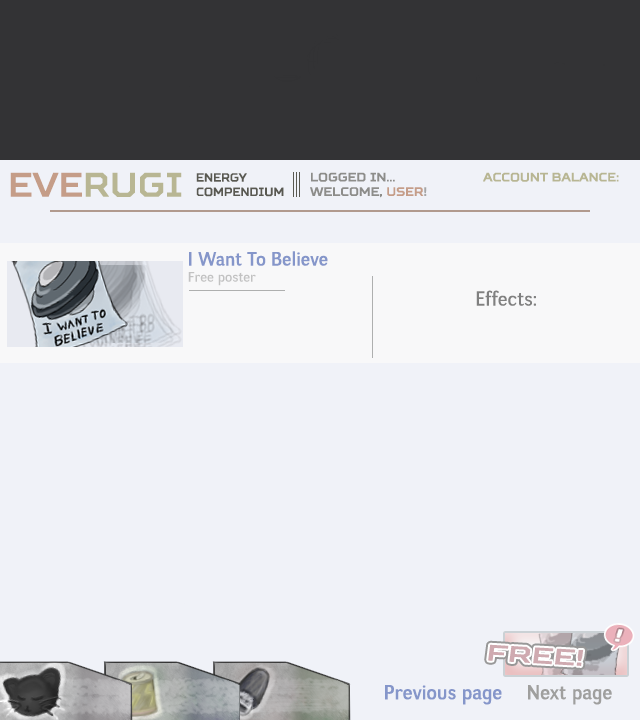
<style>
.page{position:relative;width:640px;height:720px;background:#f0f2f8}
.page>*{position:absolute;margin:0}
.t1{font:33.6px "SquaresBold";color:#b8b693}
.t2{font:33.6px "SquaresBold";color:#c59d88}
.t3{font:12px "SquaresBold";color:#595951;scale:0.92 1}
.t4{font:12px "SquaresBold";color:#8d8d8a}
.t5{font:12px "SquaresBold";color:#c59d88}
.t6{font:12px "SquaresBold";color:#a6a6a6}
.t7{font:12px "SquaresBold";color:#b8b693}
.t8{font:19px "NegotiateRg-Regular";color:#8596ca}
.t9{font:14px "NegotiateRg-Regular";color:#c2c2c2}
.t10{font:20px "NegotiateRg-Regular";color:#808080}
.t11{font:22.4px "SquaresBold";color:#cfaab0;scale:1.34 1}
.t12{font:20px "NegotiateRg-Regular";color:#8596ca}
.t13{font:20px "NegotiateRg-Regular";color:#9f9f9e}
</style>
<div class="page">
<p class="t1" style="left:10px;top:172px;width:172px;height:25px"><span class="t2">EVE</span>rugi</p>
<p class="t3" style="left:196px;top:173px;width:88px;height:24px">energy <br>compendium</p>
<p class="t4" style="left:310px;top:172px;width:117px;height:26px">Logged in...<br>Welcome, <span class="t5">user</span><span class="t6">!</span></p>
<p class="t7" style="left:483px;top:172px;width:136px;height:10px">Account balance:</p>
<p class="t8" style="left:189px;top:251px;width:139px;height:15px">I Want To Believe</p>
<p class="t9" style="left:188px;top:272px;width:68px;height:14px">Free poster</p>
<p class="t10" style="left:476px;top:290px;width:60px;height:16px"><span class="t9"><br></span>Effects:</p>
<p class="t11" style="left:488px;top:644px;width:96px;height:22px;rotate:3deg">FREE!</p>
<p class="t11" style="left:488px;top:644px;width:96px;height:22px;rotate:3deg">FREE!</p>
<p class="t12" style="left:385px;top:685px;width:117px;height:20px">Previous page</p>
<p class="t13" style="left:528px;top:685px;width:84px;height:20px">Next page</p>
<p class="t13" style="left:528px;top:685px;width:84px;height:20px"><span class="t12">                          </span>Next page</p>
</div>
